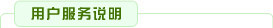
<style>
.page{position:relative;width:273px;height:28px;background:#ffffff}
.page>*{position:absolute;margin:0}
.t1{font:14px "HYk1gj";letter-spacing:0.1em;color:#417200}
</style>
<div class="page">
<p class="t1" style="left:31px;top:7px;width:90px;height:13px">用户服务说明</p>
</div>
